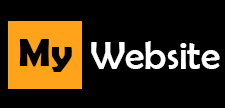
<style>
.page{position:relative;width:225px;height:108px;background:#000000}
.page>*{position:absolute;margin:0}
.t1{font:40px "BerlinSansFBDemi-Bold";color:#000000}
.t2{font:40px "BerlinSansFB-Reg";color:#ffffff}
</style>
<div class="page">
<p class="t1" style="left:19px;top:39px;width:53px;height:33px">My</p>
<p class="t2" style="left:91px;top:41px;width:129px;height:28px">Website</p>
</div>
